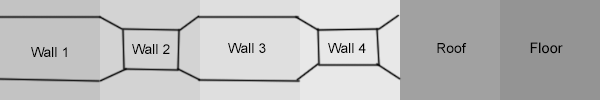
<style>
.page{position:relative;width:600px;height:100px}
.page>*{position:absolute;margin:0}
.t1{font:14px "ArialMT";color:#000000}
.t2{font:14px "Mangal";color:#000000}
</style>
<div class="page">
<p class="t1" style="left:31px;top:47px;width:36px;height:10px">Wall 1</p>
<p class="t1" style="left:132px;top:44px;width:38px;height:10px">Wall 2</p>
<p class="t1" style="left:228px;top:43px;width:38px;height:10px">Wall 3</p>
<p class="t1" style="left:328px;top:43px;width:38px;height:10px">Wall 4</p>
<p class="t1" style="left:437px;top:43px;width:30px;height:10px">Roof</p>
<p class="t2" style="left:530px;top:42px;width:33px;height:12px">Floor</p>
</div>
